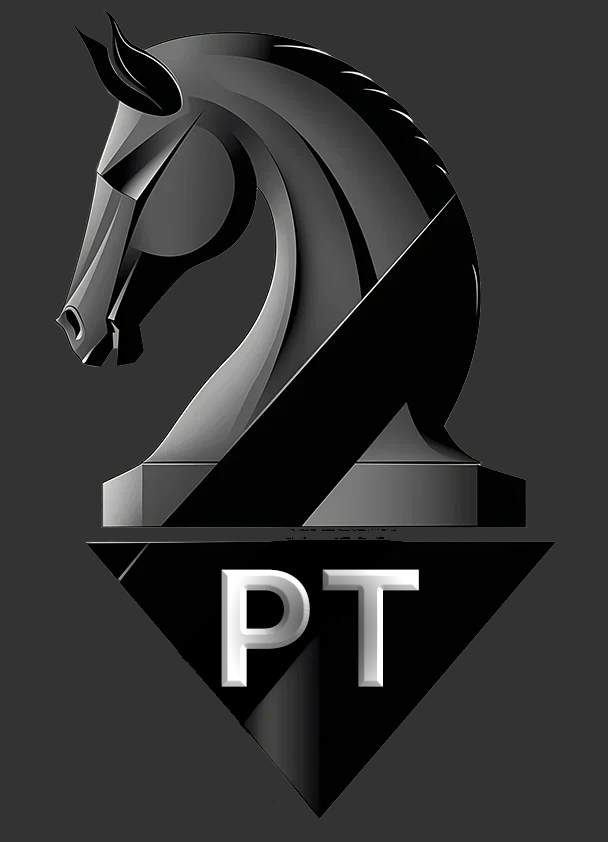
<style>
.page{position:relative;width:608px;height:842px;background:#333333}
.page>*{position:absolute;margin:0}
.t1{font:160px "InterTight-Bold";letter-spacing:0.045em}
</style>
<div class="page">
<p class="t1" style="left:221px;top:569px;width:198px;height:118px">PT</p>
</div>
